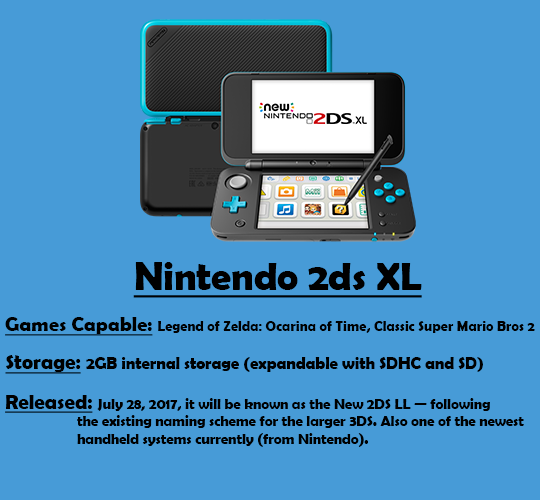
<style>
.page{position:relative;width:540px;height:500px;background:#479bd7}
.page>*{position:absolute;margin:0}
.t1{font:39.6px "BerlinSansFBDemi-Bold";color:#000000;text-decoration:underline}
.t2{font:14.2px "BerlinSansFBDemi-Bold";color:#000000}
.t3{font:20.2px "BerlinSansFBDemi-Bold";color:#000000;text-decoration:underline}
.t4{font:16.7px "BerlinSansFBDemi-Bold";color:#000000}
.t5{font:20.8px "BerlinSansFBDemi-Bold";color:#000000;text-decoration:underline}
.t6{font:14.6px "BerlinSansFBDemi-Bold";color:#000000}
</style>
<div class="page">
<p class="t1" style="left:133px;top:262px;width:289px;height:36px">Nintendo 2ds XL</p>
<p class="t2" style="left:5px;top:317px;width:530px;height:19px"><span class="t3">Games Capable: </span>Legend of Zelda: Ocarina of Time, Classic Super Mario Bros 2</p>
<p class="t4" style="left:5px;top:355px;width:478px;height:19px"><span class="t5">Storage: </span>2GB internal storage (expandable with SDHC and SD)</p>
<p class="t6" style="left:5px;top:395px;width:519px;height:52px"><span class="t5">Released: </span>July 28, 2017, it will be known as the New 2DS LL — following <br>  the existing naming scheme for the larger 3DS. Also one of the newest<br>  handheld systems currently (from Nintendo).</p>
</div>
